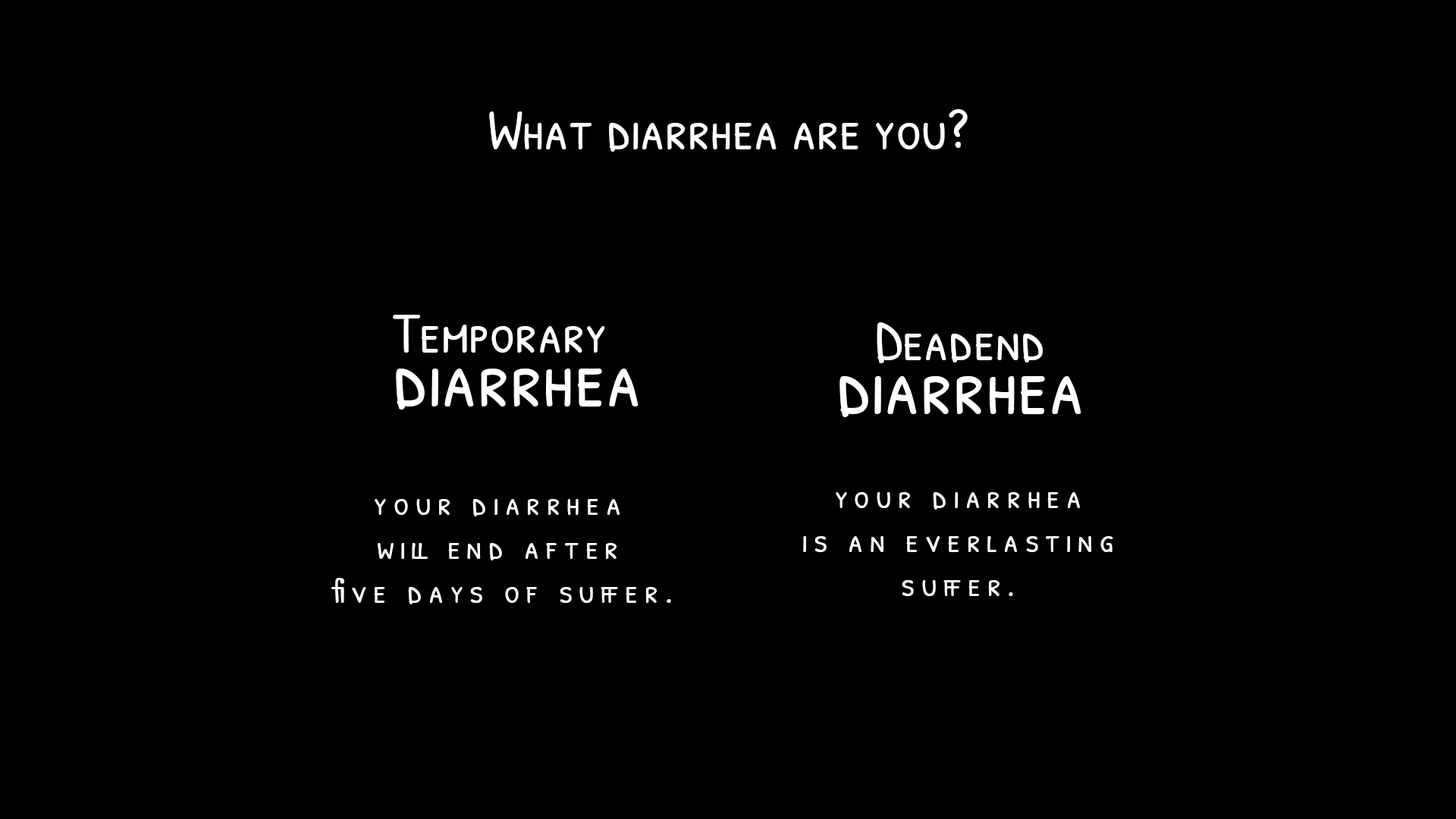
<style>
.page{position:relative;width:1456px;height:819px;background:#000000}
.page>*{position:absolute;margin:0}
.t1{font:56.9px "PatrickHandSC-Regular";color:#ffffff}
.t2{font:56.9px/53.7px "PatrickHandSC-Regular";color:#ffffff}
.t3{font:82.2px/53.7px "PatrickHandSC-Regular";color:#ffffff}
.t4{font:34.8px/44.2px "PatrickHandSC-Regular";letter-spacing:0.18em;color:#ffffff}
</style>
<div class="page">
<p class="t1" style="left:489px;top:109px;width:479px;height:43px">What diarrhea are you?</p>
<p class="t2" style="left:393px;top:315px;width:246px;height:94px">Temporary<br><span class="t3">diarrhea</span></p>
<p class="t3" style="left:839px;top:322px;width:242px;height:95px;text-align:center"><span class="t2">Deadend<br></span>diarrhea</p>
<p class="t4" style="left:803px;top:492px;width:310px;height:104px;text-align:center">your diarrhea<br>is an everlasting<br>suffer.</p>
<p class="t4" style="left:331px;top:499px;width:340px;height:105px;text-align:center">your diarrhea <br>will end after <br>five days of suffer.</p>
</div>
